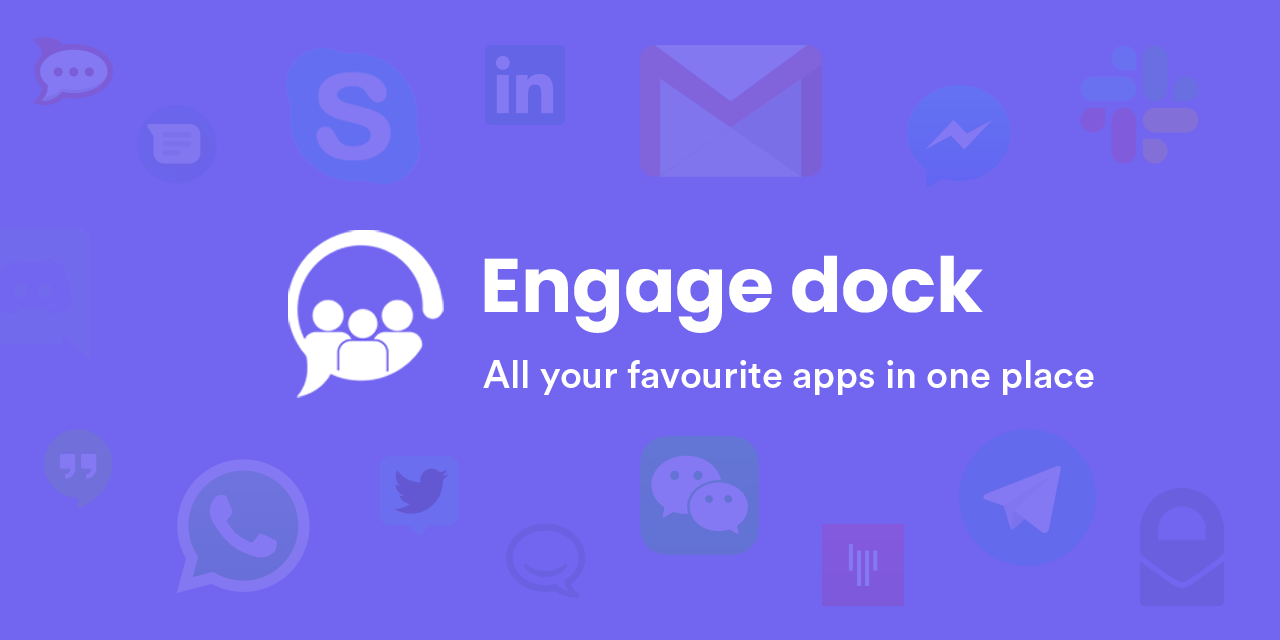
<style>
.page{position:relative;width:1280px;height:640px;background:#7265f0}
.page>*{position:absolute;margin:0}
.t1{font:76px "Poppins-Bold";color:#ffffff}
.t2{font:38px "CircularStd-Medium";color:#ffffff}
</style>
<div class="page">
<p class="t1" style="left:484px;top:255px;width:499px;height:78px">Engage dock</p>
<p class="t2" style="left:483px;top:360px;width:611px;height:35px">All your favourite apps in one place</p>
</div>
